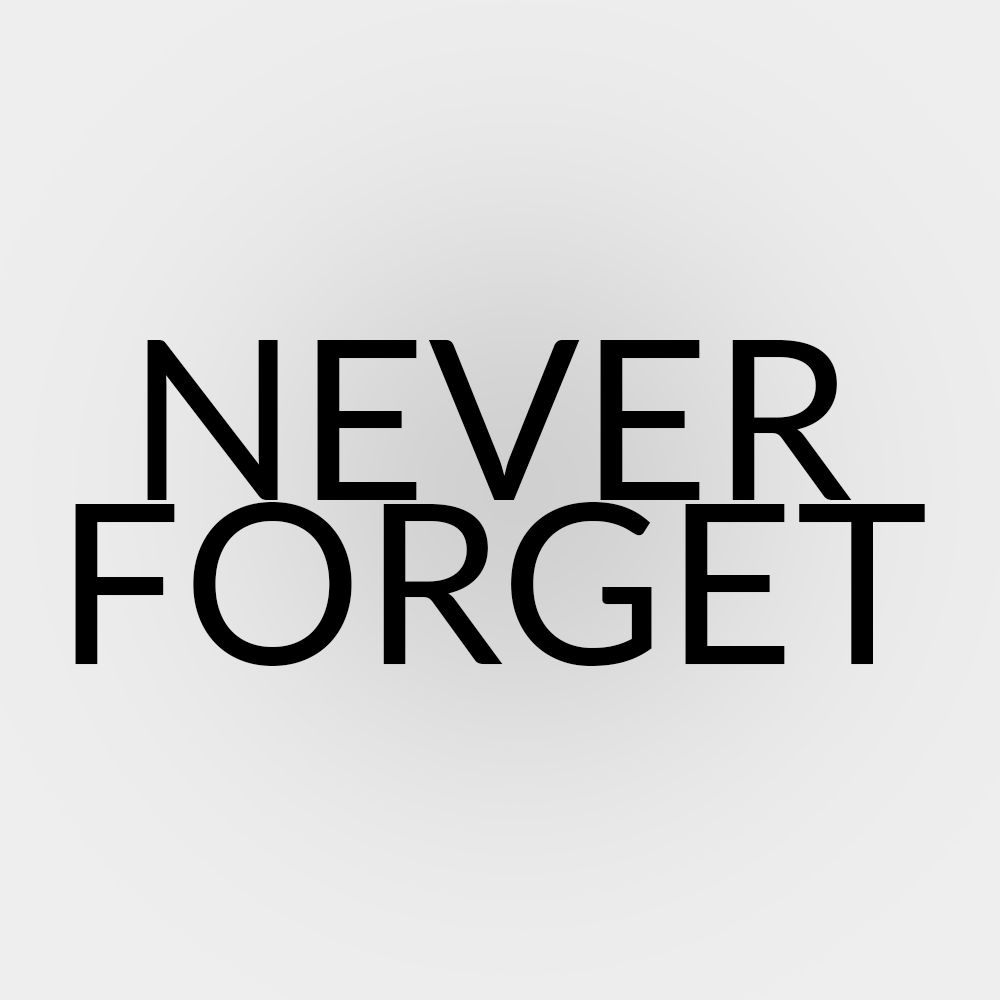
<style>
.page{position:relative;width:1000px;height:1000px}
.page>*{position:absolute;margin:0}
.t1{font:224.2px/163.7px "Lato-Regular";color:#000000}
</style>
<div class="page">
<p class="t1" style="left:75px;top:340px;width:850px;height:326px;text-align:center">NEVER<br>FORGET</p>
</div>
